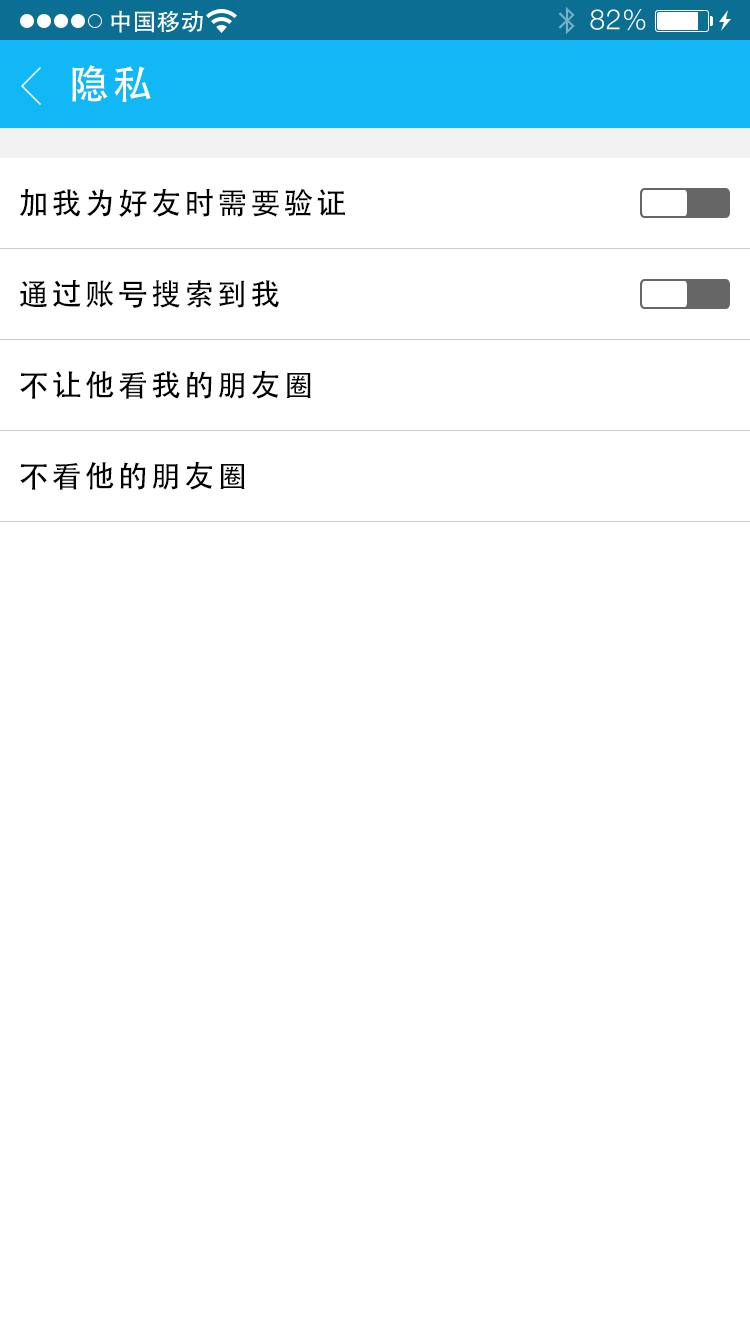
<style>
.page{position:relative;width:750px;height:1334px;background:#ffffff}
.page>*{position:absolute;margin:0}
.t1{font:40px "AdobeHeitiStd-Regular";letter-spacing:0.104em;color:#ffffff}
.t2{font:30px "AdobeHeitiStd-Regular";letter-spacing:0.104em;color:#000000}
</style>
<div class="page">
<p class="t1" style="left:72px;top:65px;width:79px;height:37px">隐私</p>
<p class="t2" style="left:19px;top:188px;width:326px;height:29px">加我为好友时需要验证</p>
<p class="t2" style="left:19px;top:279px;width:260px;height:29px">通过账号搜索到我</p>
<p class="t2" style="left:20px;top:370px;width:291px;height:29px">不让他看我的朋友圈</p>
<p class="t2" style="left:20px;top:461px;width:225px;height:29px">不看他的朋友圈</p>
</div>
